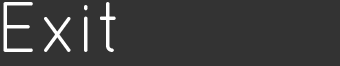
<style>
.page{position:relative;width:340px;height:66px;background:#333333}
.page>*{position:absolute;margin:0}
.t1{font:72px "Quicksand-Regular";color:#ffffff}
</style>
<div class="page">
<p class="t1" style="left:3px;top:2px;width:113px;height:50px">Exit</p>
</div>
